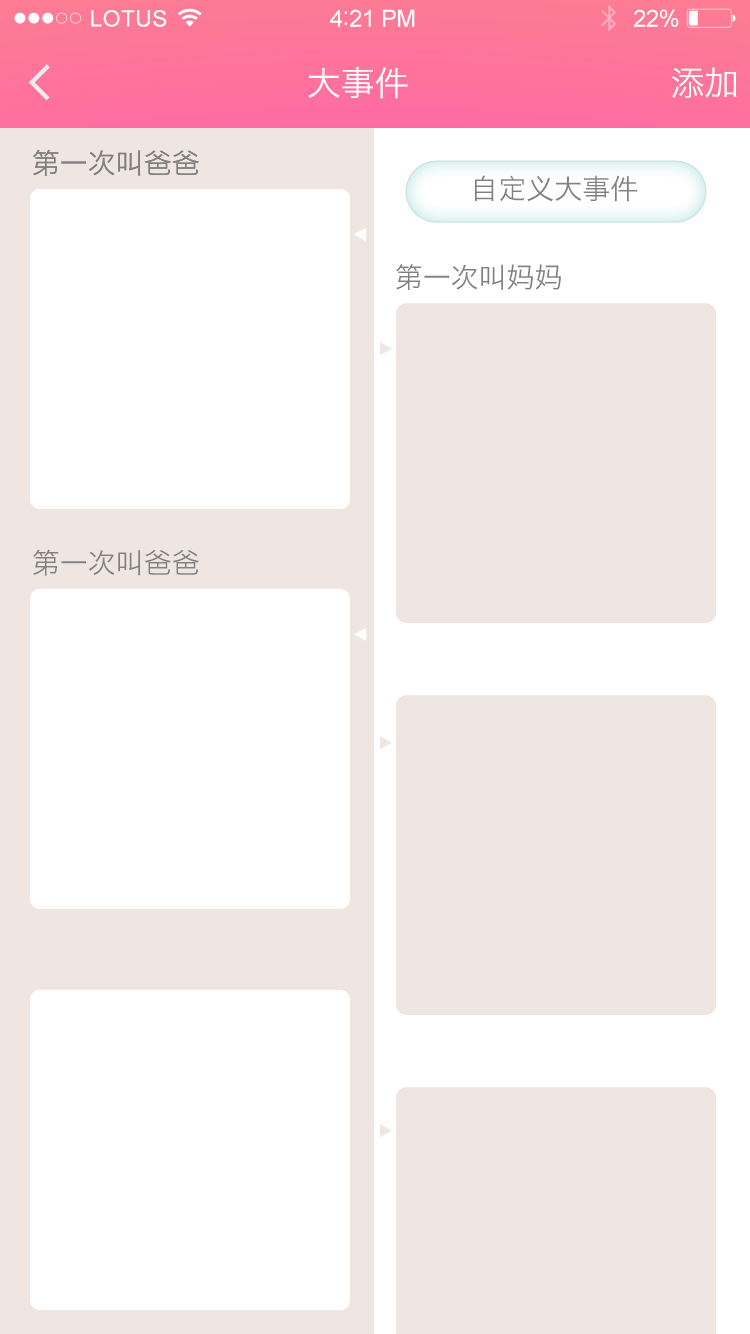
<style>
.page{position:relative;width:750px;height:1334px;background:#ffffff}
.page>*{position:absolute;margin:0}
.t1{font:22.6px "ArialMT";letter-spacing:0.02em;color:#ffffff}
.t2{font:23.6px "ArialMT";letter-spacing:-0.02em;color:#ffffff}
.t3{font:25.6px "ArialMT";letter-spacing:-0.02em;color:#ffffff}
.t4{font:34px "HiraginoSansGB-W3";color:#ffffff}
.t5{font:28px "HiraginoSansGB-W3";color:#808080}
</style>
<div class="page">
<p class="t1" style="left:91px;top:10px;width:76px;height:17px">LOTUS</p>
<p class="t2" style="left:330px;top:9px;width:85px;height:18px">4<span class="t3">:</span>21 PM</p>
<p class="t2" style="left:634px;top:9px;width:45px;height:18px">22%</p>
<p class="t4" style="left:308px;top:67px;width:100px;height:32px">大事件</p>
<p class="t4" style="left:672px;top:67px;width:65px;height:31px">添加</p>
<p class="t5" style="left:33px;top:149px;width:166px;height:27px">第一次叫爸爸</p>
<p class="t5" style="left:33px;top:149px;width:166px;height:27px">第一次叫爸爸</p>
<p class="t5" style="left:474px;top:175px;width:163px;height:27px">自定义大事件</p>
<p class="t5" style="left:396px;top:264px;width:165px;height:26px">第一次叫妈妈</p>
<p class="t5" style="left:33px;top:549px;width:166px;height:27px">第一次叫爸爸</p>
</div>
